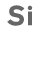
<style>
.page{position:relative;width:40px;height:70px;background:#ffffff}
.page>*{position:absolute;margin:0}
.t1{font:26px "Transport-Heavy-Regular";color:#666666}
</style>
<div class="page">
<p class="t1" style="left:7px;top:5px;width:26px;height:21px">Si</p>
</div>
